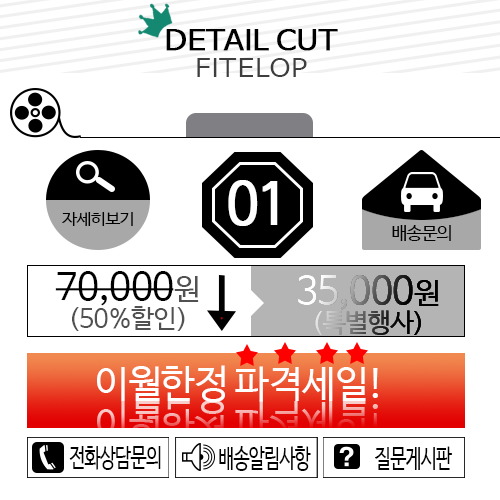
<style>
.page{position:relative;width:500px;height:500px;background:#ffffff}
.page>*{position:absolute;margin:0}
.t1{font:27.2px/11.5px "NanumBarunGothic";letter-spacing:-0.02em;color:#000000;font-weight:bold;scale:1.15 1}
.t2{font:23.9px/27.2px "NanumBarunGothic";letter-spacing:0.04em;color:#3e3e3e;scale:1.15 1}
.t3{font:56.9px "NanumBarunGothic";letter-spacing:-0.06em;color:#ffffff;font-weight:bold;scale:0.96 1}
.t4{font:15.9px "NanumBarunGothic";letter-spacing:-0.06em;color:#000000;scale:1.09 1}
.t5{font:17.9px "NanumBarunGothic";letter-spacing:-0.06em;color:#000000}
.t6{font:26px/28px "NanumBarunGothic";letter-spacing:-0.02em;color:#515151}
.t7{font:38px/28px "NanumBarunGothic";letter-spacing:-0.02em;color:#000000}
.t8{font:30px/28px "NanumBarunGothic";letter-spacing:-0.02em;color:#515151}
.t9{font:38px "NanumBarunGothic";letter-spacing:-0.02em;color:#ffffff}
.t10{font:25.6px "NanumBarunGothic";letter-spacing:-0.02em;color:#000000;scale:0.69 1}
</style>
<div class="page">
<p class="t1" style="left:166px;top:29px;width:172px;height:48px;text-align:center">DETAIL CUT<br><span class="t2">FITELOP</span></p>
<p class="t3" style="left:228px;top:180px;width:50px;height:46px">01</p>
<p class="t4" style="left:62px;top:212px;width:71px;height:14px">자세히보기</p>
<p class="t5" style="left:392px;top:225px;width:59px;height:16px">배송문의</p>
<p class="t6" style="left:55px;top:271px;width:144px;height:60px;text-align:center"><span class="t7">70,000</span><span class="t8">원<br></span>(50%할인)</p>
<p class="t9" style="left:97px;top:365px;width:281px;height:37px">이월한정 파격세일!</p>
<p class="t10" style="left:69px;top:446px;width:92px;height:24px">전화상담문의</p>
<p class="t10" style="left:219px;top:446px;width:92px;height:25px">배송알림사항</p>
<p class="t10" style="left:375px;top:446px;width:77px;height:24px">질문게시판</p>
</div>
